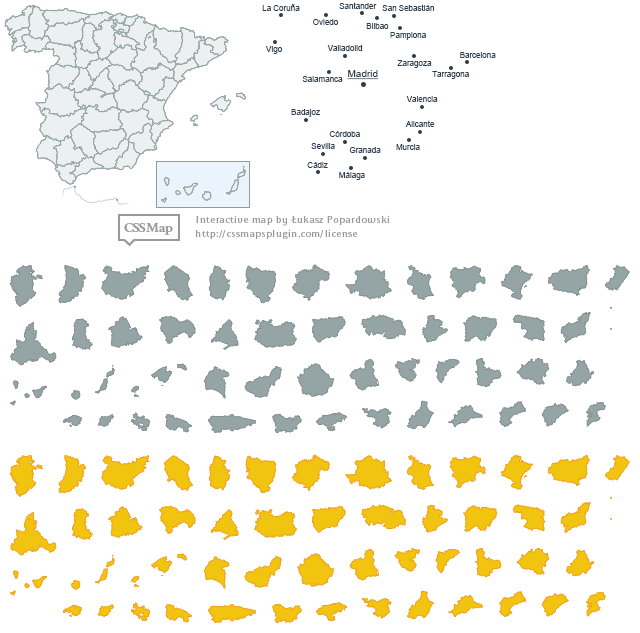
<style>
.page{position:relative;width:640px;height:633px;background:#ffffff}
.page>*{position:absolute;margin:0}
.t1{font:8px "ArialMT";color:#2c3e50}
.t2{font:10px "ArialMT";color:#2c3e50;text-decoration:underline}
</style>
<div class="page">
<p class="t1" style="left:262px;top:4px;width:38px;height:7px">La Coruña</p>
<p class="t1" style="left:339px;top:2px;width:38px;height:7px">Santander</p>
<p class="t1" style="left:382px;top:4px;width:52px;height:7px">San Sebastián</p>
<p class="t1" style="left:313px;top:19px;width:25px;height:6px">Oviedo</p>
<p class="t1" style="left:366px;top:23px;width:23px;height:6px">Bilbao</p>
<p class="t1" style="left:390px;top:32px;width:36px;height:8px">Pamplona</p>
<p class="t1" style="left:266px;top:46px;width:16px;height:8px">Vigo</p>
<p class="t1" style="left:327px;top:45px;width:36px;height:6px">Valladolid</p>
<p class="t1" style="left:460px;top:52px;width:36px;height:6px">Barcelona</p>
<p class="t1" style="left:397px;top:60px;width:35px;height:8px">Zaragoza</p>
<p class="t1" style="left:302px;top:76px;width:41px;height:6px">Salamanca</p>
<p class="t2" style="left:347px;top:70px;width:32px;height:10px">Madrid</p>
<p class="t1" style="left:432px;top:71px;width:37px;height:8px">Tarragona</p>
<p class="t1" style="left:406px;top:96px;width:32px;height:6px">Valencia</p>
<p class="t1" style="left:291px;top:109px;width:29px;height:8px">Badajoz</p>
<p class="t1" style="left:405px;top:120px;width:30px;height:7px">Alicante</p>
<p class="t1" style="left:329px;top:131px;width:31px;height:6px">Córdoba</p>
<p class="t1" style="left:311px;top:143px;width:24px;height:6px">Sevilla</p>
<p class="t1" style="left:349px;top:147px;width:32px;height:6px">Granada</p>
<p class="t1" style="left:396px;top:144px;width:24px;height:6px">Murcia</p>
<p class="t1" style="left:307px;top:162px;width:21px;height:6px">Cádiz</p>
<p class="t1" style="left:339px;top:172px;width:26px;height:8px">Málaga</p>
</div>
